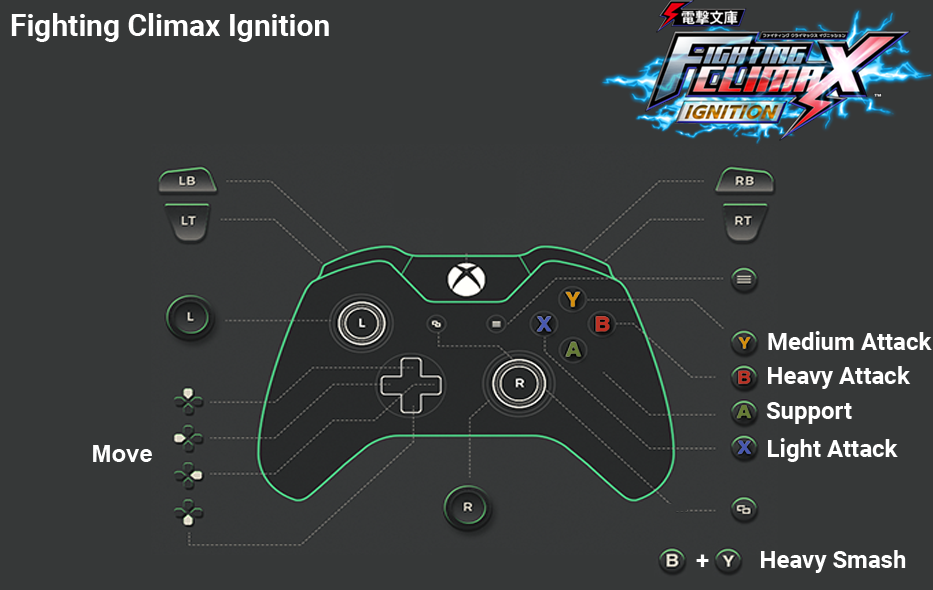
<style>
.page{position:relative;width:933px;height:590px;background:#363838}
.page>*{position:absolute;margin:0}
.t1{font:30px "Roboto-Bold";color:#ffffff}
.t2{font:24px "Roboto-Bold";color:#ffffff}
.t3{font:24px "Arial-BoldMT";color:#fefefe}
.t4{font:24px "Roboto-Bold";color:#fefefe}
</style>
<div class="page">
<p class="t1" style="left:11px;top:13px;width:318px;height:29px">Fighting Climax Ignition</p>
<p class="t2" style="left:768px;top:331px;width:164px;height:19px">Medium Attack</p>
<p class="t2" style="left:768px;top:366px;width:143px;height:23px">Heavy Attack</p>
<p class="t2" style="left:766px;top:402px;width:86px;height:22px">Support</p>
<p class="t2" style="left:768px;top:438px;width:130px;height:24px">Light Attack</p>
<p class="t3" style="left:93px;top:445px;width:59px;height:17px">Move</p>
<p class="t4" style="left:696px;top:554px;width:13px;height:13px">+</p>
<p class="t2" style="left:761px;top:550px;width:145px;height:23px">Heavy Smash</p>
</div>
